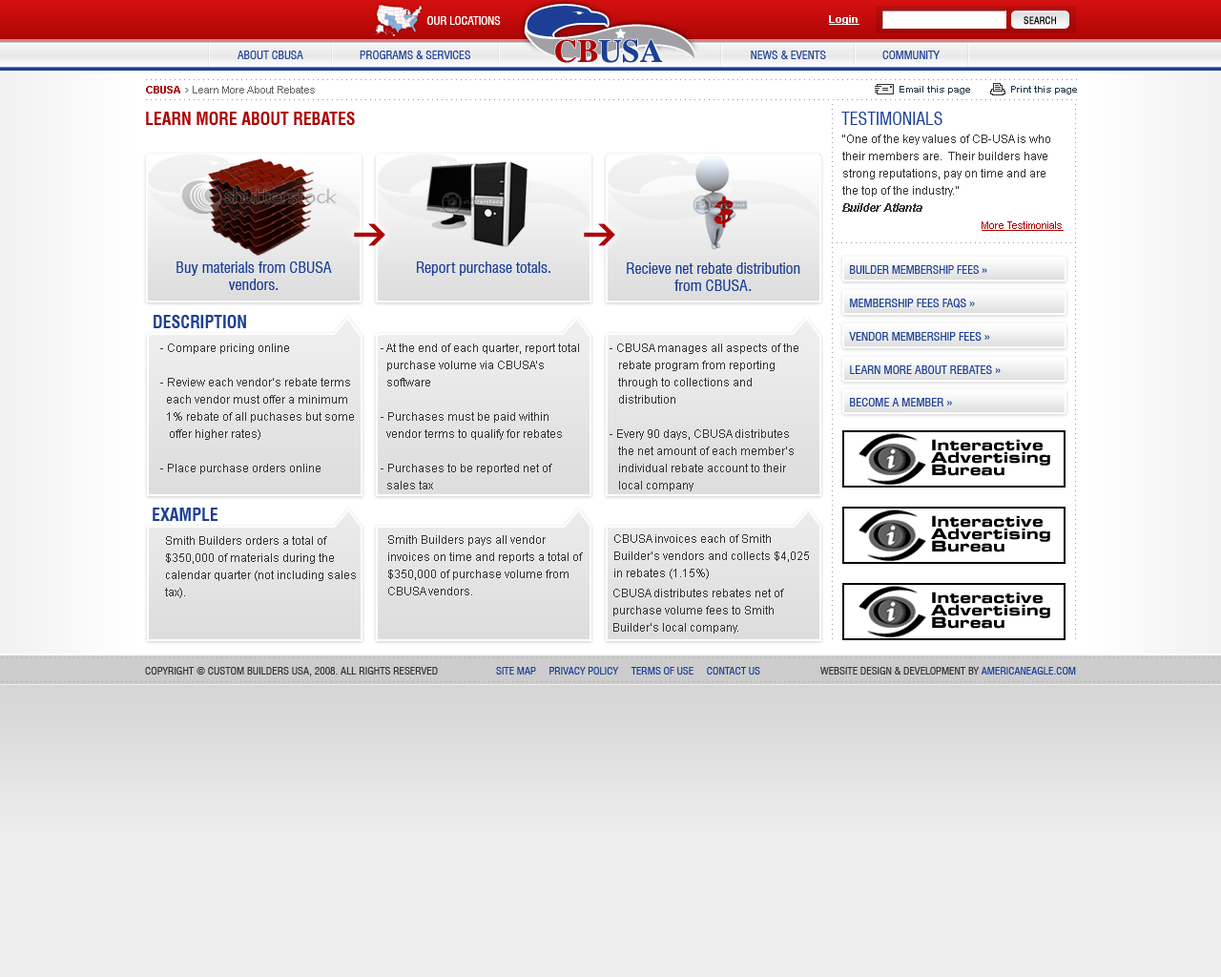
<style>
.page{position:relative;width:1221px;height:977px}
.page>*{position:absolute;margin:0}
.t1{font:11.4px "Swiss721BT-RomanCondensed";letter-spacing:-0.002em;color:#ffffff;text-transform:uppercase}
.t2{font:10.5px "Arial-BoldMT";color:#fffffe;text-decoration:underline}
.t3{font:9.5px "Swiss721BT-RomanCondensed";color:#000000;text-transform:uppercase;font-weight:bold}
.t4{font:11.4px "Swiss721BT-RomanCondensed";letter-spacing:-0.002em;color:#1c3f95;text-transform:uppercase}
.t5{font:10.5px "ArialMT";color:#666666}
.t6{font:10.5px "Arial-BoldMT";color:#ad0505}
.t7{font:9.5px "Arial-BoldMT";color:#1f3749}
.t8{font:17.2px "Swiss721BT-BoldCondensed";color:#ad0505;text-transform:uppercase}
.t9{font:17.2px "Swiss721BT-RomanCondensed";color:#1c3f95;text-transform:uppercase}
.t10{font:11.4px/17.2px "ArialMT";color:#333333}
.t11{font:11.4px/17.2px "Arial-BoldItalicMT";color:#333333}
.t12{font:10.5px/17.2px "ArialMT";color:#ad0505;text-decoration:underline}
.t13{font:15.3px/17.2px "Swiss721BT-RomanCondensed";color:#1c3f95}
.t14{font:15.3px "Swiss721BT-RomanCondensed";color:#1c3f95}
.t15{font:11.4px "Swiss721BT-RomanCondensed";color:#1c3f95;text-transform:uppercase}
.t16{font:11.7px "Swiss721BT-RomanCondensed";color:#1c3f95;text-transform:uppercase}
.t17{font:17.2px "Swiss721BT-BoldCondensed";color:#1c3f95;text-transform:uppercase}
.t18{font:10.5px "Swiss721BT-RomanCondensed";color:#333333;text-transform:uppercase}
.t19{font:10.5px "Swiss721BT-RomanCondensed";color:#1c3f95;text-transform:uppercase}
</style>
<div class="page">
<p class="t1" style="left:427px;top:16px;width:74px;height:9px;opacity:0.75">Our Locations</p>
<p class="t1" style="left:427px;top:16px;width:74px;height:9px">Our Locations</p>
<p class="t2" style="left:829px;top:15px;width:30px;height:10px">Login</p>
<p class="t3" style="left:1023px;top:16px;width:33px;height:9px">Search</p>
<p class="t4" style="left:237px;top:51px;width:703px;height:8px">About CBUSA                    Programs &amp; Services                                                                                                   News &amp; Events                    Community</p>
<p class="t5" style="left:146px;top:86px;width:169px;height:7px"><span class="t6">CBUSA</span>    Learn More About Rebates</p>
<p class="t7" style="left:899px;top:86px;width:71px;height:8px">Email this page</p>
<p class="t7" style="left:1011px;top:86px;width:66px;height:8px">Print this page</p>
<p class="t8" style="left:146px;top:112px;width:209px;height:13px">Learn more about rebates</p>
<p class="t9" style="left:841px;top:112px;width:101px;height:13px">Testimonials</p>
<p class="t10" style="left:842px;top:134px;width:221px;height:97px">“One of the key values of CB-USA is who their members are.  Their builders have strong reputations, pay on time and are the top of the industry.”<br><span class="t11">Builder Atlanta<br></span><span class="t12">More Testimonials</span></p>
<p class="t13" style="left:176px;top:261px;width:156px;height:29px;text-align:center">Buy materials from CBUSA vendors.</p>
<p class="t14" style="left:417px;top:261px;width:133px;height:15px">Report purchase totals.</p>
<p class="t13" style="left:627px;top:262px;width:173px;height:29px;text-align:center">Recieve net rebate distribution from CBUSA.</p>
<p class="t4" style="left:850px;top:265px;width:137px;height:9px">Builder membership fees <span class="t15">»</span></p>
<p class="t16" style="left:850px;top:299px;width:125px;height:9px">MEMBERSHIP FEES FAQS »</p>
<p class="t17" style="left:154px;top:315px;width:92px;height:13px">Description</p>
<p class="t16" style="left:849px;top:332px;width:141px;height:9px">VENDOR MEMBERSHIP FEES »</p>
<p class="t10" style="left:160px;top:343px;width:194px;height:131px">- Compare pricing online<br><br>- Review each vendor’s rebate terms                each vendor must offer a minimum                 1% rebate of all puchases but some       <br>   offer higher rates)<br><br>- Place purchase orders online</p>
<p class="t10" style="left:381px;top:343px;width:198px;height:146px">- At the end of each quarter, report total             purchase volume via CBUSA’s <br>  software<br><br>- Purchases must be paid within <br>  vendor terms to qualify for rebates<br><br>- Purchases to be reported net of <br>  sales tax</p>
<p class="t10" style="left:609px;top:343px;width:189px;height:148px">- CBUSA manages all aspects of the      rebate program from reporting        through to collections and <br>   distribution <br><br>- Every 90 days, CBUSA distributes       the net amount of each member’s <br>   individual rebate account to their     local company<br><br><br>   tax</p>
<p class="t16" style="left:850px;top:365px;width:151px;height:9px">LEARN MORE ABOUT REBATES »</p>
<p class="t16" style="left:850px;top:398px;width:102px;height:8px">BECOME A MEMBER »</p>
<p class="t17" style="left:153px;top:507px;width:64px;height:14px">Example</p>
<p class="t10" style="left:165px;top:536px;width:191px;height:62px">Smith Builders orders a total of $350,000 of materials during the calendar quarter (not including sales tax).</p>
<p class="t10" style="left:388px;top:535px;width:195px;height:60px">Smith Builders pays all vendor invoices on time and reports a total of $350,000 of purchase volume from CBUSA vendors.</p>
<p class="t10" style="left:614px;top:534px;width:195px;height:45px">CBUSA invoices each of Smith Builder’s vendors and collects $4,025 in rebates (1.15%)</p>
<p class="t10" style="left:613px;top:589px;width:171px;height:44px">CBUSA distributes rebates net of    purchase volume fees to Smith          Builder’s local company.</p>
<p class="t18" style="left:145px;top:667px;width:293px;height:9px">Copyright © Custom Builders USA, 2008. All Rights Reserved</p>
<p class="t19" style="left:496px;top:667px;width:264px;height:7px">Site map     Privacy Policy     Terms of Use     Contact Us</p>
<p class="t18" style="left:820px;top:667px;width:256px;height:7px">Website Design &amp; Development by <span class="t19">Americaneagle.com</span></p>
</div>
